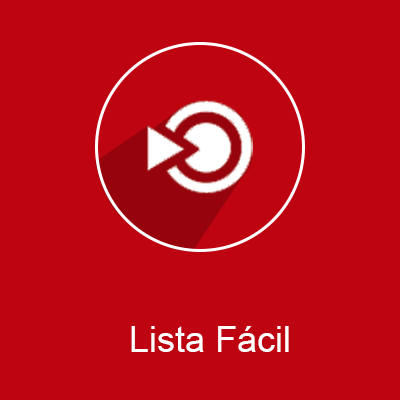
<style>
.page{position:relative;width:400px;height:400px;background:#bf0411}
.page>*{position:absolute;margin:0}
.t1{font:36px "ArialMT";color:#ffffff}
</style>
<div class="page">
<p class="t1" style="left:131px;top:326px;width:158px;height:26px">Lista Fácil</p>
</div>
